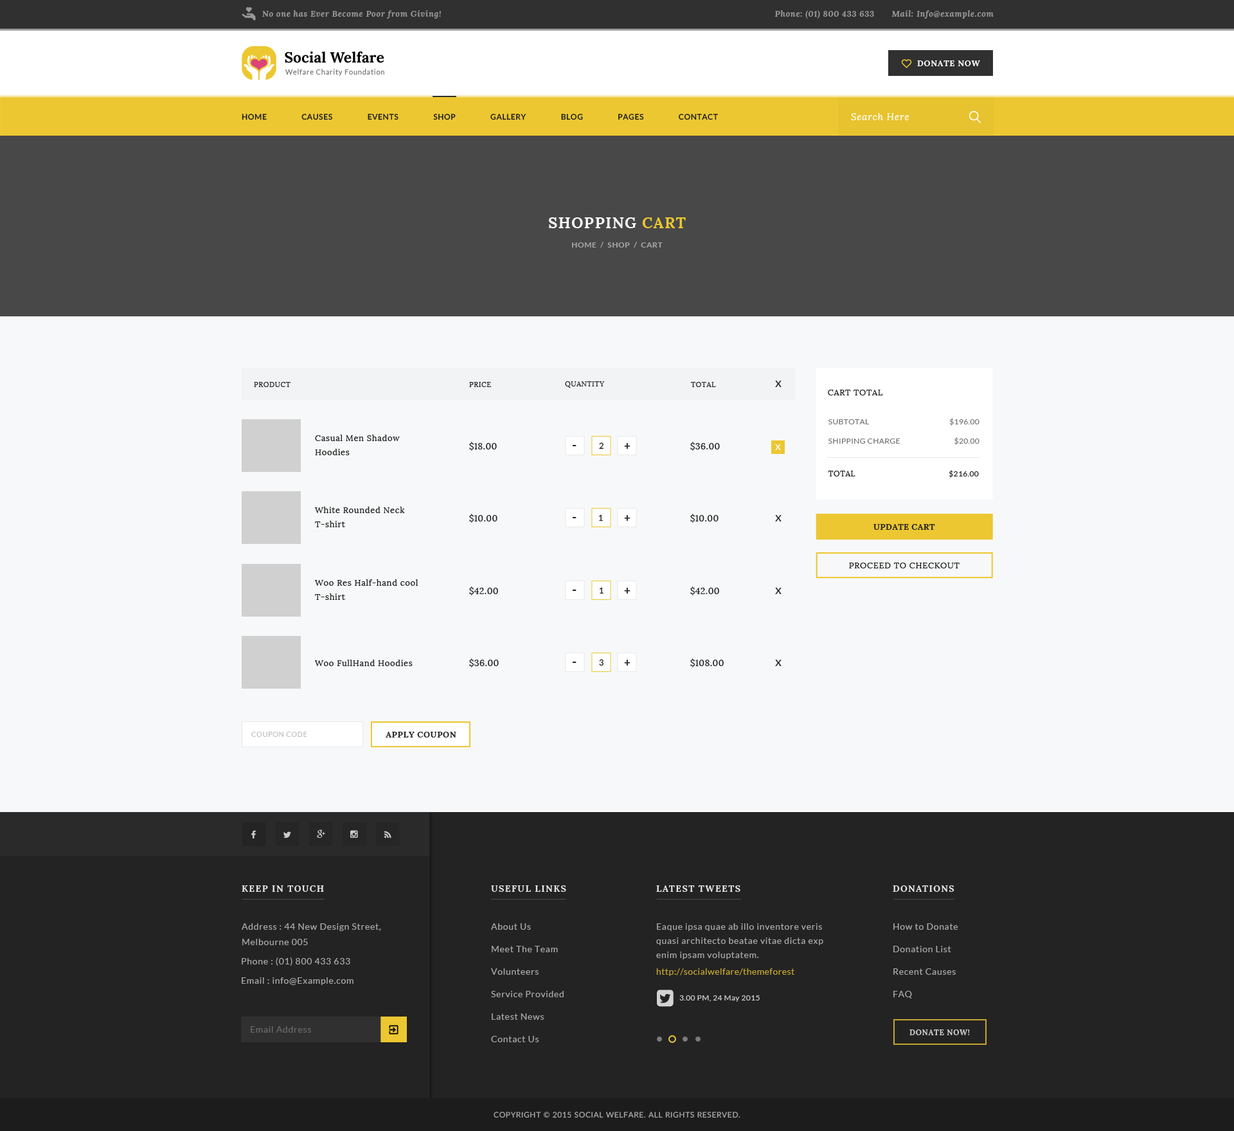
<style>
.page{position:relative;width:1234px;height:1131px;background:#f7f8f9}
.page>*{position:absolute;margin:0}
.t1{font:8.4px "Lora-BoldItalic";letter-spacing:0.05em;color:#999999}
.t2{font:8.4px "Lora-Bold";letter-spacing:0.05em;color:#ffffff;text-transform:uppercase}
.t3{font:7.7px "Lato-Semibold";letter-spacing:0.05em;color:#212121;text-transform:uppercase}
.t4{font:9.6px "Lora-Italic";letter-spacing:0.05em;color:#ffffff}
.t5{font:15.4px "Lora-Bold";letter-spacing:0.05em;color:#f7f8f9;text-transform:uppercase}
.t6{font:15.4px "Lora-Bold";letter-spacing:0.05em;color:#ecc731;text-transform:uppercase}
.t7{font:7.7px "Lato-Bold";letter-spacing:0.05em;color:#aaaaaa;text-transform:uppercase}
.t8{font:7.1px "Lora-Regular";letter-spacing:0.05em;color:#232323;text-transform:uppercase}
.t9{font:12.9px "Lato-Regular";letter-spacing:0.05em;color:#232323}
.t10{font:8.4px "Lora-Regular";letter-spacing:0.05em;color:#232323}
.t11{font:7.7px "Lato-Regular";letter-spacing:0.03em;color:#777777;text-transform:uppercase}
.t12{font:8.4px/14.1px "Lora-Regular";letter-spacing:0.05em;color:#232323}
.t13{font:9px "Lora-Regular";letter-spacing:0.03em;color:#212121;text-transform:uppercase}
.t14{font:12.9px "Lato-Bold";letter-spacing:0.03em;color:#232323}
.t15{font:8.4px "Lato-Medium";letter-spacing:0.03em;color:#232323}
.t16{font:10.9px "Lato-Bold";letter-spacing:0.03em;color:#232323}
.t17{font:11.6px "Lato-Regular";letter-spacing:0.05em;color:#ffffff}
.t18{font:7.7px "Lora-Regular";letter-spacing:0.05em;color:#212121;text-transform:uppercase}
.t19{font:7.7px "Lato-Regular";letter-spacing:0.03em;color:#212121;text-transform:uppercase}
.t20{font:8.4px "Lora-Bold";letter-spacing:0.03em;color:#232323;text-transform:uppercase}
.t21{font:8.4px "Lora-Regular";letter-spacing:0.05em;color:#232323;text-transform:uppercase}
.t22{font:7.1px "Lato-Regular";letter-spacing:0.05em;color:#bfbfbf;text-transform:uppercase}
.t23{font:8.4px "Lora-Bold";letter-spacing:0.05em;color:#232323;text-transform:uppercase}
.t24{font:9px "Lora-Bold";letter-spacing:0.1em;color:#e8e8e8;text-transform:uppercase}
.t25{font:9px/15.4px "Lato-Regular";letter-spacing:0.05em;color:#aaaaaa}
.t26{font:9px "Lato-Regular";letter-spacing:0.05em;color:#aaaaaa}
.t27{font:9px/14.1px "Lato-Regular";letter-spacing:0.05em;color:#aaaaaa}
.t28{font:9px "Lato-Regular";letter-spacing:0.03em;color:#c4a62e}
.t29{font:7.7px "Lato-Regular";letter-spacing:0.03em;color:#d3d3d3}
.t30{font:9px "Lato-Regular";letter-spacing:0.05em;color:#686868}
.t31{font:7.7px "Lora-Bold";letter-spacing:0.05em;color:#d3d3d3;text-transform:uppercase}
.t32{font:7.7px "Lato-Medium";letter-spacing:0.05em;color:#aaaaaa;text-transform:uppercase}
</style>
<div class="page">
<p class="t1" style="left:262px;top:10px;width:179px;height:9px">No one has Ever Become Poor from Giving!</p>
<p class="t1" style="left:775px;top:10px;width:99px;height:9px">Phone: (01) 800 433 633</p>
<p class="t1" style="left:892px;top:10px;width:102px;height:9px">Mail: Info@example.com</p>
<p class="t2" style="left:917px;top:60px;width:63px;height:6px">donate now</p>
<p class="t3" style="left:242px;top:114px;width:476px;height:6px">home               Causes               Events               Shop               Gallery               Blog               pages               Contact</p>
<p class="t4" style="left:851px;top:113px;width:59px;height:7px">Search Here</p>
<p class="t5" style="left:549px;top:217px;width:137px;height:11px">Shopping <span class="t6">Cart</span></p>
<p class="t7" style="left:572px;top:242px;width:91px;height:6px">Home  /  Shop  /  cart</p>
<p class="t8" style="left:254px;top:382px;width:37px;height:5px">Product</p>
<p class="t8" style="left:469px;top:382px;width:22px;height:5px">pRICE</p>
<p class="t8" style="left:565px;top:381px;width:40px;height:7px">qUANTITY</p>
<p class="t8" style="left:691px;top:382px;width:25px;height:5px">tOTAL</p>
<p class="t9" style="left:775px;top:381px;width:7px;height:6px">x</p>
<p class="t10" style="left:828px;top:390px;width:55px;height:5px">CART TOTAL</p>
<p class="t11" style="left:829px;top:419px;width:40px;height:5px">SubTotal</p>
<p class="t11" style="left:950px;top:418px;width:30px;height:8px">$196.00</p>
<p class="t12" style="left:315px;top:435px;width:85px;height:20px">Casual Men Shadow <br>Hoodies</p>
<p class="t11" style="left:955px;top:437px;width:25px;height:8px">$20.00</p>
<p class="t13" style="left:469px;top:442px;width:28px;height:9px">$18.00</p>
<p class="t14" style="left:573px;top:445px;width:4px;height:1px">-</p>
<p class="t15" style="left:599px;top:442px;width:5px;height:7px">2</p>
<p class="t16" style="left:624px;top:443px;width:7px;height:6px">+</p>
<p class="t13" style="left:690px;top:442px;width:30px;height:9px">$36.00</p>
<p class="t17" style="left:775px;top:444px;width:6px;height:6px">x</p>
<p class="t11" style="left:829px;top:438px;width:71px;height:6px">Shipping Charge</p>
<p class="t18" style="left:828px;top:471px;width:28px;height:5px">total</p>
<p class="t19" style="left:949px;top:470px;width:30px;height:8px">$216.00</p>
<p class="t12" style="left:315px;top:507px;width:90px;height:20px">White Rounded Neck<br>T-shirt</p>
<p class="t13" style="left:469px;top:514px;width:29px;height:9px">$10.00</p>
<p class="t14" style="left:573px;top:517px;width:4px;height:1px">-</p>
<p class="t15" style="left:599px;top:514px;width:4px;height:7px">1</p>
<p class="t16" style="left:624px;top:515px;width:7px;height:6px">+</p>
<p class="t13" style="left:690px;top:514px;width:29px;height:9px">$10.00</p>
<p class="t9" style="left:775px;top:515px;width:7px;height:6px">x</p>
<p class="t20" style="left:874px;top:524px;width:61px;height:6px">update cart</p>
<p class="t21" style="left:849px;top:562px;width:111px;height:6px">Proceed to checkout</p>
<p class="t12" style="left:315px;top:579px;width:103px;height:21px">Woo Res Half-hand cool<br>T-shirt</p>
<p class="t13" style="left:469px;top:586px;width:29px;height:9px">$42.00</p>
<p class="t14" style="left:573px;top:590px;width:4px;height:1px">-</p>
<p class="t15" style="left:600px;top:587px;width:4px;height:7px">1</p>
<p class="t16" style="left:624px;top:588px;width:7px;height:5px">+</p>
<p class="t13" style="left:690px;top:586px;width:29px;height:9px">$42.00</p>
<p class="t9" style="left:775px;top:588px;width:7px;height:6px">x</p>
<p class="t10" style="left:315px;top:660px;width:98px;height:6px">Woo FullHand Hoodies</p>
<p class="t13" style="left:469px;top:658px;width:30px;height:9px">$36.00</p>
<p class="t14" style="left:573px;top:662px;width:4px;height:1px">-</p>
<p class="t15" style="left:599px;top:659px;width:5px;height:7px">3</p>
<p class="t16" style="left:624px;top:660px;width:7px;height:5px">+</p>
<p class="t13" style="left:690px;top:658px;width:34px;height:9px">$108.00</p>
<p class="t9" style="left:775px;top:660px;width:7px;height:6px">x</p>
<p class="t22" style="left:251px;top:732px;width:56px;height:5px">coupon code</p>
<p class="t23" style="left:386px;top:732px;width:70px;height:5px">apply coupon</p>
<p class="t24" style="left:242px;top:885px;width:82px;height:7px">keep in touch</p>
<p class="t24" style="left:491px;top:885px;width:75px;height:7px">useful links</p>
<p class="t24" style="left:656px;top:885px;width:85px;height:7px">Latest Tweets</p>
<p class="t24" style="left:893px;top:885px;width:62px;height:7px">Donations</p>
<p class="t25" style="left:242px;top:923px;width:139px;height:22px">Address : 44 New Design Street,<br>Melbourne 005</p>
<p class="t26" style="left:491px;top:923px;width:40px;height:7px">About Us</p>
<p class="t27" style="left:656px;top:923px;width:168px;height:36px">Eaque ipsa quae ab illo inventore veris <br>quasi architecto beatae vitae dicta exp<br>enim ipsam voluptatem.</p>
<p class="t26" style="left:894px;top:923px;width:65px;height:7px">How to Donate</p>
<p class="t26" style="left:492px;top:946px;width:66px;height:6px">Meet The Team</p>
<p class="t26" style="left:894px;top:946px;width:57px;height:6px">Donation List</p>
<p class="t26" style="left:242px;top:957px;width:108px;height:9px">Phone : (01) 800 433 633</p>
<p class="t26" style="left:242px;top:977px;width:112px;height:8px">Email : info@Example.com</p>
<p class="t26" style="left:491px;top:968px;width:48px;height:7px">Volunteers</p>
<p class="t28" style="left:656px;top:968px;width:139px;height:8px">http://socialwelfare/themeforest</p>
<p class="t26" style="left:894px;top:968px;width:62px;height:7px">Recent Causes</p>
<p class="t26" style="left:491px;top:991px;width:73px;height:6px">Service Provided</p>
<p class="t29" style="left:680px;top:995px;width:80px;height:7px">3.00 PM, 24 May 2015</p>
<p class="t26" style="left:894px;top:991px;width:18px;height:7px">FAQ</p>
<p class="t26" style="left:492px;top:1013px;width:52px;height:7px">Latest News</p>
<p class="t30" style="left:251px;top:1026px;width:60px;height:6px">Email Address</p>
<p class="t26" style="left:491px;top:1036px;width:48px;height:6px">Contact Us</p>
<p class="t31" style="left:910px;top:1029px;width:60px;height:6px">Donate now!</p>
<p class="t32" style="left:494px;top:1112px;width:247px;height:6px">Copyright © 2015 social welfare. All Rights Reserved.</p>
</div>
